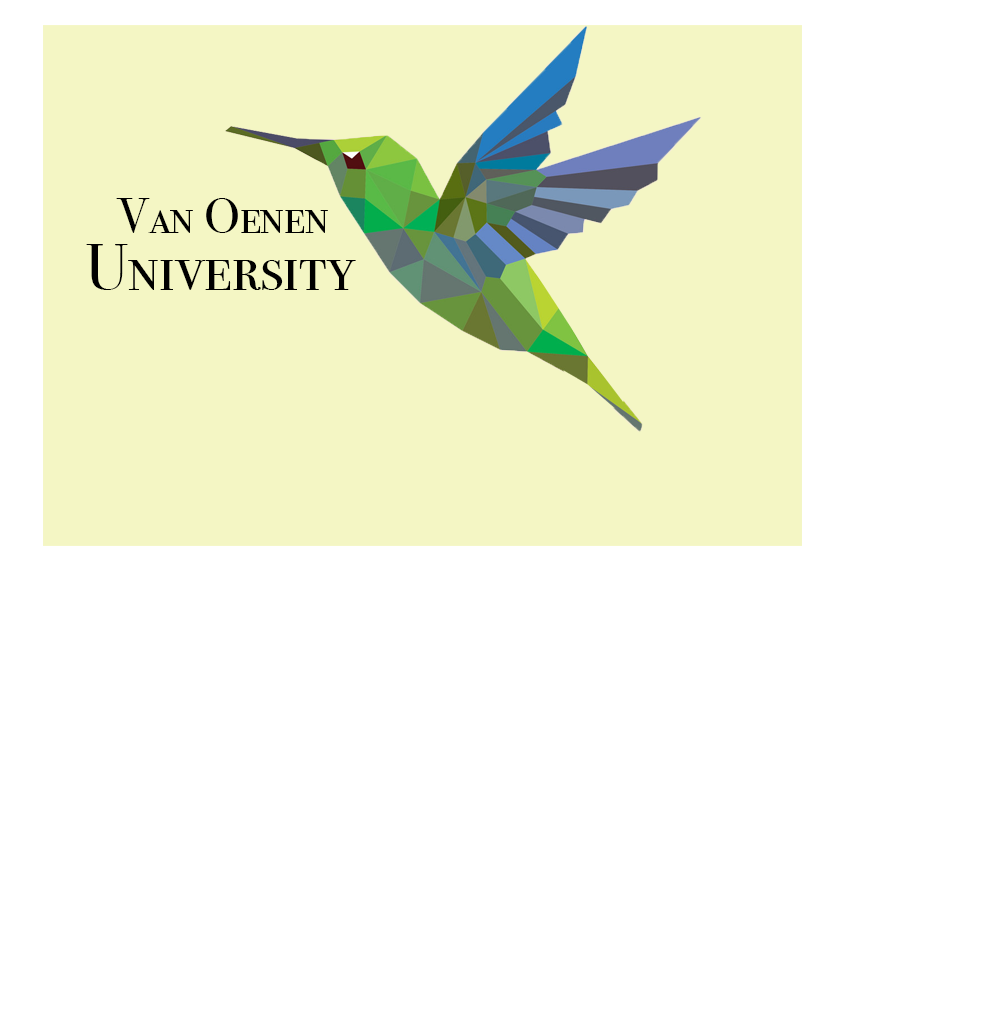
<style>
.page{position:relative;width:1000px;height:1019px;background:#ffffff}
.page>*{position:absolute;margin:0}
.t1{font:50px "BodoniSvtyTwoSCITCTT-Book";color:#000000}
.t2{font:65px "BodoniSvtyTwoSCITCTT-Book";color:#000000}
</style>
<div class="page">
<p class="t1" style="left:116px;top:198px;width:212px;height:35px">Van Oenen</p>
<p class="t2" style="left:86px;top:244px;width:270px;height:46px">University</p>
</div>
